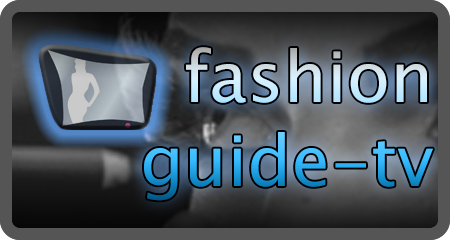
<style>
.page{position:relative;width:450px;height:240px}
.page>*{position:absolute;margin:0}
.t1{font:70px "LucidaSansUnicode"}
</style>
<div class="page">
<p class="t1" style="left:144px;top:47px;width:289px;height:154px;text-align:right">fashion<br>guide-tv</p>
</div>
